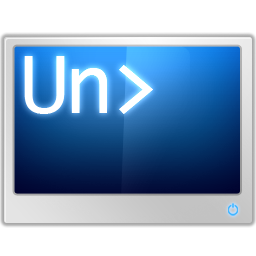
<style>
.page{position:relative;width:256px;height:256px;background:#ffffff}
.page>*{position:absolute;margin:0}
.t1{font:88.9px "Consolas";letter-spacing:-0.04em;color:#ffffff}
</style>
<div class="page">
<p class="t1" style="left:24px;top:56px;width:129px;height:58px">Un&gt;</p>
</div>
